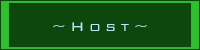
<style>
.page{position:relative;width:200px;height:50px;background:#0c470c}
.page>*{position:absolute;margin:0}
.t1{font:16.7px "BankGothicBT-Light";letter-spacing:0.28em;color:#b8e7f8}
</style>
<div class="page">
<p class="t1" style="left:53px;top:22px;width:94px;height:9px">~Host~</p>
</div>
